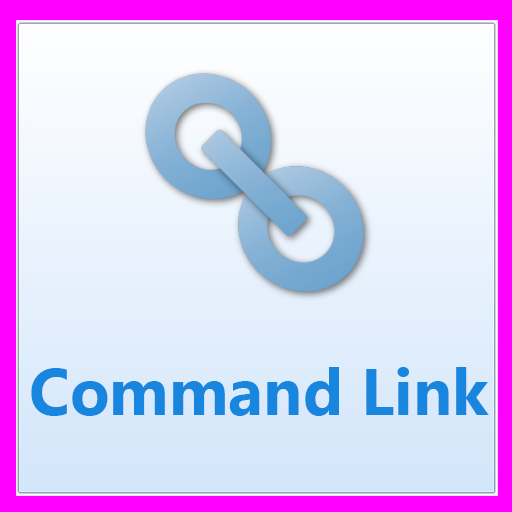
<style>
.page{position:relative;width:512px;height:512px}
.page>*{position:absolute;margin:0}
.t1{font:65px "SegoeUI-Bold";color:#1885df}
</style>
<div class="page">
<p class="t1" style="left:31px;top:367px;width:458px;height:49px">Command Link</p>
</div>
